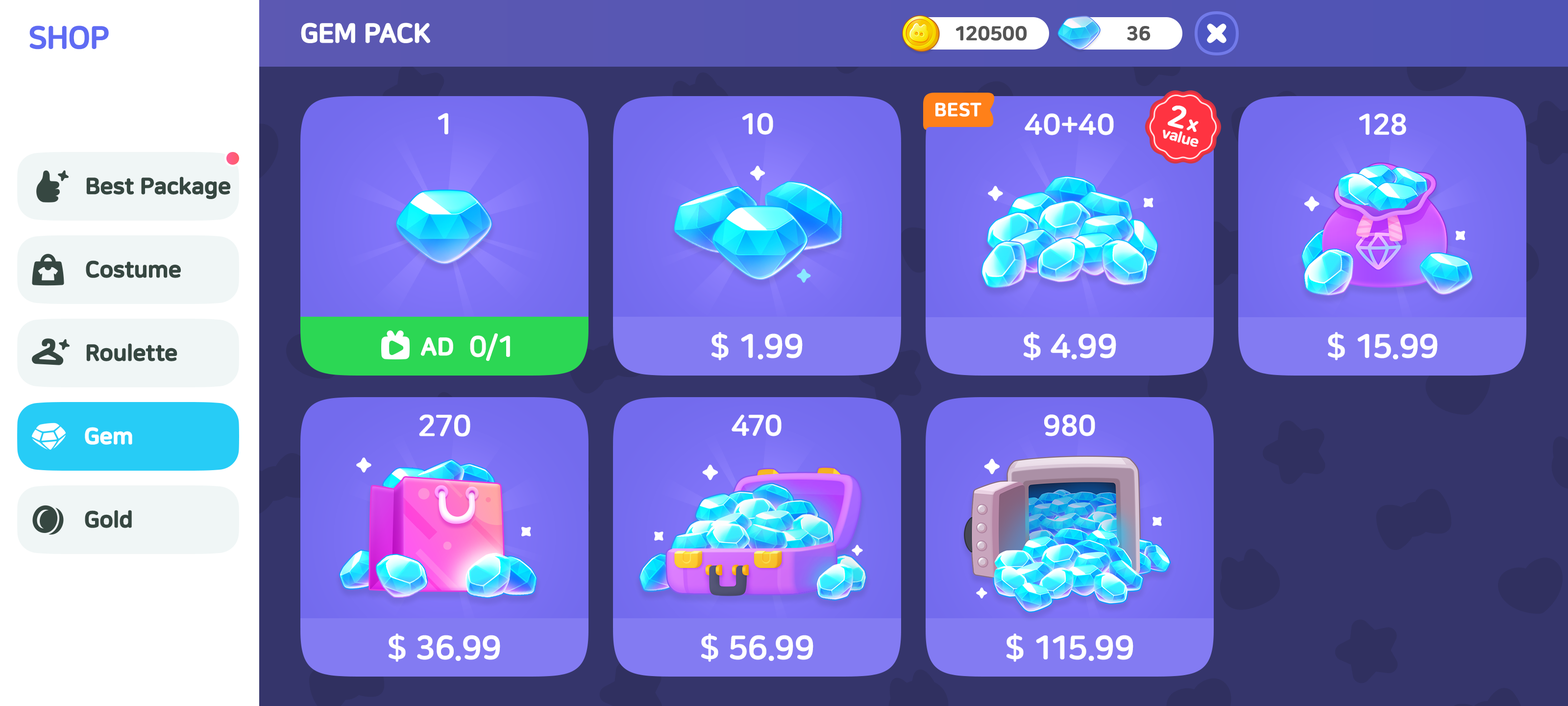
<style>
.page{position:relative;width:1568px;height:706px}
.page>*{position:absolute;margin:0}
.t1{font:31.4px "NanumSquareRoundOTFEB";letter-spacing:-0.03em;color:#5f6bf3;font-weight:bold}
.t2{font:26.5px "NanumSquareRoundOTFEB";letter-spacing:-0.02em;color:#ffffff;text-transform:uppercase;font-weight:bold}
.t3{font:19.6px "NanumSquareRoundOTFEB";color:#555555;font-weight:bold}
.t4{font:29.4px "NanumSquareRoundOTFEB";color:#ffffff}
.t5{font:18.6px "NanumSquareRoundOTFEB";color:#ffffff;text-transform:uppercase;font-weight:bold}
.t6{font:29.8px "NanumSquareRoundOTFEB";letter-spacing:-0.03em;color:#ffffff;font-weight:bold}
.t7{font:19.9px "NanumSquareRoundOTFEB";letter-spacing:-0.03em;color:#ffffff;font-weight:bold}
.t8{font:14.9px "NanumSquareRoundOTFEB";letter-spacing:-0.03em;color:#fdf8f9;font-weight:bold}
.t9{font:22.5px "NanumSquareRoundOTFEB";letter-spacing:-0.02em;color:#364741;font-weight:bold}
.t10{font:24.5px "NanumSquareRoundEB";letter-spacing:-0.02em;color:#ffffff;text-transform:uppercase;font-weight:bold}
.t11{font:33.3px "NanumSquareRoundOTFEB";letter-spacing:-0.01em;color:#ffffff;text-transform:uppercase}
.t12{font:29.4px "NanumSquareRoundB";color:#ffffff;font-weight:bold}
.t13{font:22.5px "NanumSquareRoundOTFEB";letter-spacing:-0.02em;color:#ffffff;font-weight:bold}
</style>
<div class="page">
<p class="t1" style="left:29px;top:25px;width:80px;height:24px">SHOP</p>
<p class="t2" style="left:301px;top:23px;width:129px;height:20px">GEM PACK</p>
<p class="t3" style="left:956px;top:26px;width:71px;height:15px">120500</p>
<p class="t3" style="left:1127px;top:26px;width:24px;height:15px">36</p>
<p class="t4" style="left:438px;top:113px;width:10px;height:21px">1</p>
<p class="t4" style="left:742px;top:113px;width:31px;height:22px">10</p>
<p class="t5" style="left:935px;top:102px;width:46px;height:15px">best</p>
<p class="t4" style="left:1025px;top:113px;width:89px;height:22px">40+40</p>
<p class="t6" style="left:1168px;top:105px;width:31px;height:27px;rotate:15deg">2 <span class="t7">x</span></p>
<p class="t4" style="left:1359px;top:113px;width:47px;height:22px">128</p>
<p class="t8" style="left:1163px;top:129px;width:36px;height:18px;rotate:15deg">value</p>
<p class="t9" style="left:86px;top:176px;width:145px;height:23px">Best Package</p>
<p class="t9" style="left:86px;top:260px;width:95px;height:18px">Costume</p>
<p class="t10" style="left:420px;top:337px;width:33px;height:19px">Ad</p>
<p class="t4" style="left:470px;top:333px;width:40px;height:28px">0/1</p>
<p class="t11" style="left:711px;top:332px;width:92px;height:28px">$ 1.99</p>
<p class="t11" style="left:1024px;top:332px;width:92px;height:28px">$ 4.99</p>
<p class="t11" style="left:1328px;top:332px;width:110px;height:28px">$ 15.99</p>
<p class="t9" style="left:86px;top:343px;width:91px;height:18px">Roulette</p>
<p class="t12" style="left:419px;top:414px;width:51px;height:23px">270</p>
<p class="t4" style="left:732px;top:414px;width:50px;height:22px">470</p>
<p class="t4" style="left:1044px;top:414px;width:51px;height:22px">980</p>
<p class="t13" style="left:85px;top:427px;width:47px;height:17px">Gem</p>
<p class="t9" style="left:85px;top:510px;width:47px;height:18px">Gold</p>
<p class="t11" style="left:389px;top:633px;width:111px;height:29px">$ 36.99</p>
<p class="t11" style="left:701px;top:633px;width:112px;height:29px">$ 56.99</p>
<p class="t11" style="left:1006px;top:633px;width:127px;height:29px">$ 115.99</p>
</div>
